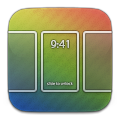
<style>
.page{position:relative;width:120px;height:120px;background:#ffffff}
.page>*{position:absolute;margin:0}
.t1{font:11px "MyriadPro-Regular";letter-spacing:0.02em;color:#d5d7c7}
.t2{font:4.2px "MyriadPro-Regular"}
</style>
<div class="page">
<p class="t1" style="left:51px;top:40px;width:18px;height:8px">9:41</p>
<p class="t2" style="left:47px;top:82px;width:26px;height:4px">slide to unlock</p>
</div>
